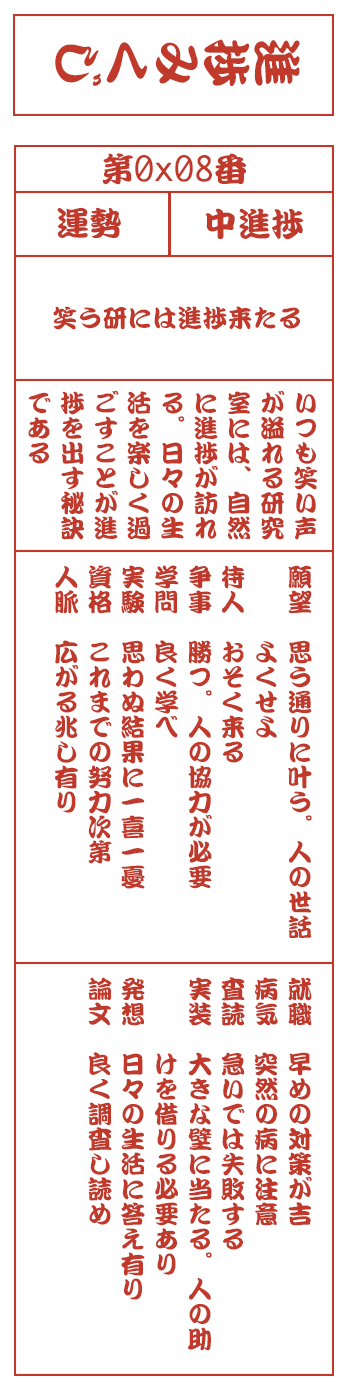
<style>
.page{position:relative;width:350px;height:1400px;background:#ffffff}
.page>*{position:absolute;margin:0}
.t1{font:50px "DFKanTeiRyu-XB-MP-RKSJ-H";color:#c0392b}
.t2{font:33.3px "Monaco";color:#c0392b}
.t3{font:33.3px "DFKanTeiRyu-XB-MP-RKSJ-H";color:#c0392b}
.t4{font:25px "DFKanTeiRyu-XB-MP-RKSJ-H";color:#c0392b}
.t5{font:25px/33.3px "DFKanTeiRyu-XB-MP-RKSJ-H";color:#c0392b}
</style>
<div class="page">
<p class="t1" style="left:55px;top:39px;width:245px;height:47px;rotate:90deg">進捗みくじ</p>
<p class="t2" style="left:102px;top:153px;width:144px;height:32px"><span class="t3">第</span>0x08<span class="t3">番</span></p>
<p class="t3" style="left:57px;top:207px;width:64px;height:31px">運勢</p>
<p class="t3" style="left:205px;top:208px;width:98px;height:32px">中進捗</p>
<p class="t4" style="left:53px;top:306px;width:247px;height:24px">笑う研には進捗来たる</p>
<p class="t5" style="left:28px;top:390px;width:290px;height:150px">いつも笑い声<br>が溢れる研究<br>室には、自然<br>に進捗が訪れ<br>る。日々の生<br>活を楽しく過<br>ごすことが進<br>捗を出す秘訣<br>である</p>
<p class="t5" style="left:55px;top:565px;width:257px;height:373px">願望　思う通りに叶う。人の世話<br>　　　よくせよ<br>待人　おそく来る<br>争事　勝つ。人の協力が必要<br>学問　良く学べ<br>実験　思わぬ結果に一喜一憂<br>資格　これまでの努力次第<br>人脈　広がる兆し有り</p>
<p class="t5" style="left:88px;top:977px;width:224px;height:374px">就職　早めの対策が吉<br>病気　突然の病に注意<br>査読　急いでは失敗する<br>実装　大きな壁に当たる。人の助<br>　　　けを借りる必要あり<br>発想　日々の生活に答え有り<br>論文　良く調査し読め</p>
</div>
